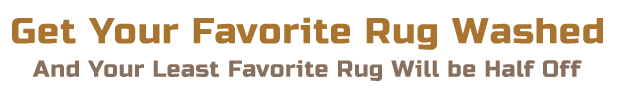
<style>
.page{position:relative;width:620px;height:96px;background:#ffffff}
.page>*{position:absolute;margin:0}
.t1{font:36.1px "RussoOne-Regular";letter-spacing:0.025em;color:#a8742f}
.t2{font:23.2px "RussoOne-Regular";letter-spacing:0.025em;color:#896f5d}
</style>
<div class="page">
<p class="t1" style="left:12px;top:17px;width:591px;height:33px">Get Your Favorite Rug Washed</p>
<p class="t2" style="left:32px;top:60px;width:550px;height:21px">And Your Least Favorite Rug Will be Half Off</p>
</div>
